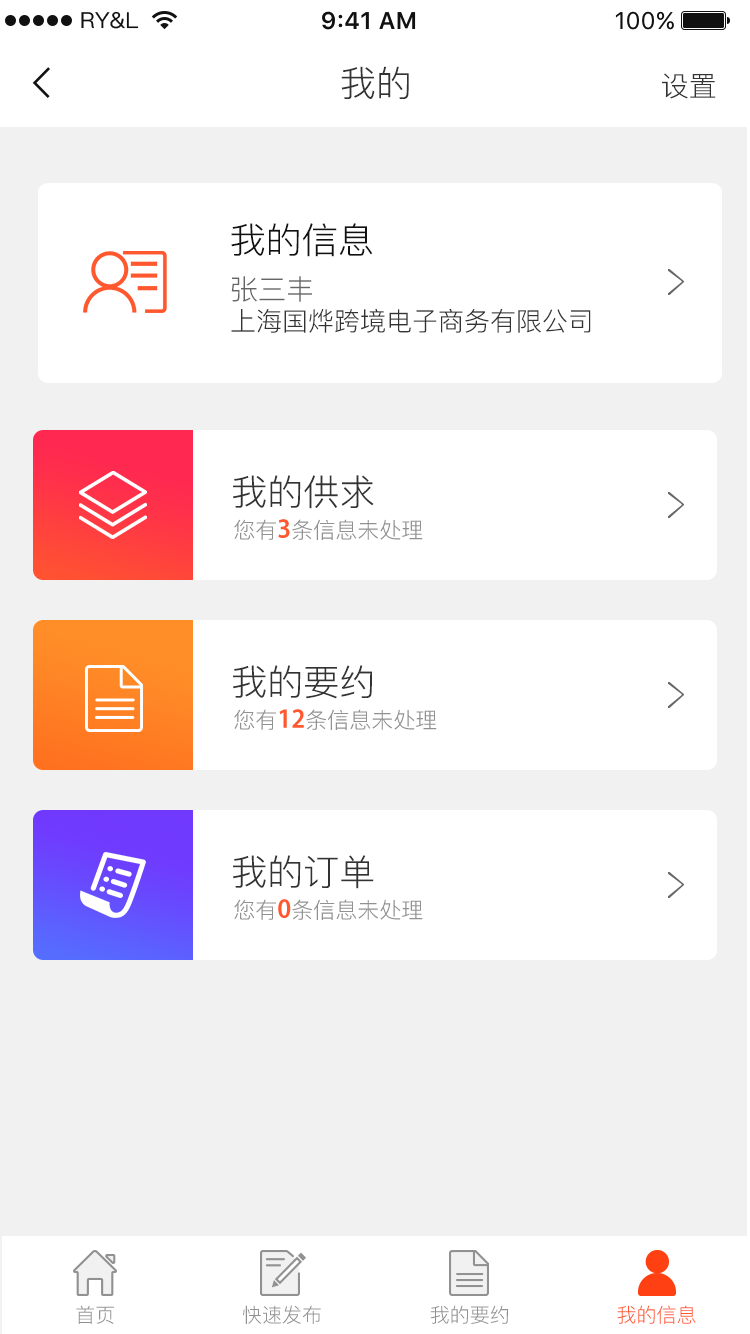
<style>
.page{position:relative;width:750px;height:1334px;background:#ffffff}
.page>*{position:absolute;margin:0}
.t1{font:36px "PingFang-SC-Regular";color:#333333}
.t2{font:28px "PingFang-SC-Regular";color:#333333}
.t3{font:36px "PingFang-SC-Regular";color:#111111}
.t4{font:26px "PingFang-SC-Regular";color:#333333}
.t5{font:28px "PingFang-SC-Regular";color:#666666}
.t6{font:22px "PingFang-SC-Regular";color:#919191}
.t7{font:28px "MyriadPro-SemiboldSemiCn";color:#ff572e}
.t8{font:20px "PingFang-SC-Regular";color:#919191}
.t9{font:20px "PingFang-SC-Regular";color:#ff572e}
</style>
<div class="page">
<p class="t1" style="left:341px;top:66px;width:68px;height:33px">我的</p>
<p class="t2" style="left:662px;top:73px;width:54px;height:26px">设置</p>
<p class="t3" style="left:231px;top:223px;width:142px;height:34px">我的信息</p>
<p class="t4" style="left:231px;top:276px;width:360px;height:57px"><span class="t5">张三丰<br></span>上海国烨跨境电子商务有限公司</p>
<p class="t1" style="left:233px;top:475px;width:141px;height:34px">我的供求</p>
<p class="t6" style="left:234px;top:519px;width:189px;height:21px">您有<span class="t7">3</span>条信息未处理</p>
<p class="t1" style="left:233px;top:665px;width:139px;height:34px">我的要约</p>
<p class="t6" style="left:234px;top:709px;width:203px;height:21px">您有<span class="t7">12</span>条信息未处理</p>
<p class="t1" style="left:233px;top:855px;width:141px;height:34px">我的订单</p>
<p class="t6" style="left:234px;top:899px;width:189px;height:21px">您有<span class="t7">0</span>条信息未处理</p>
<p class="t8" style="left:76px;top:1305px;width:38px;height:19px">首页</p>
<p class="t8" style="left:243px;top:1305px;width:78px;height:19px">快速发布</p>
<p class="t8" style="left:430px;top:1305px;width:78px;height:19px">我的要约</p>
<p class="t9" style="left:617px;top:1305px;width:79px;height:19px">我的信息</p>
</div>
